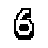
<style>
.page{position:relative;width:48px;height:48px;background:#ffffff}
.page>*{position:absolute;margin:0}
.t1{font:36px "KarmaFuture-Regular";color:#010101}
</style>
<div class="page">
<p class="t1" style="left:14px;top:8px;width:20px;height:32px">6</p>
</div>
